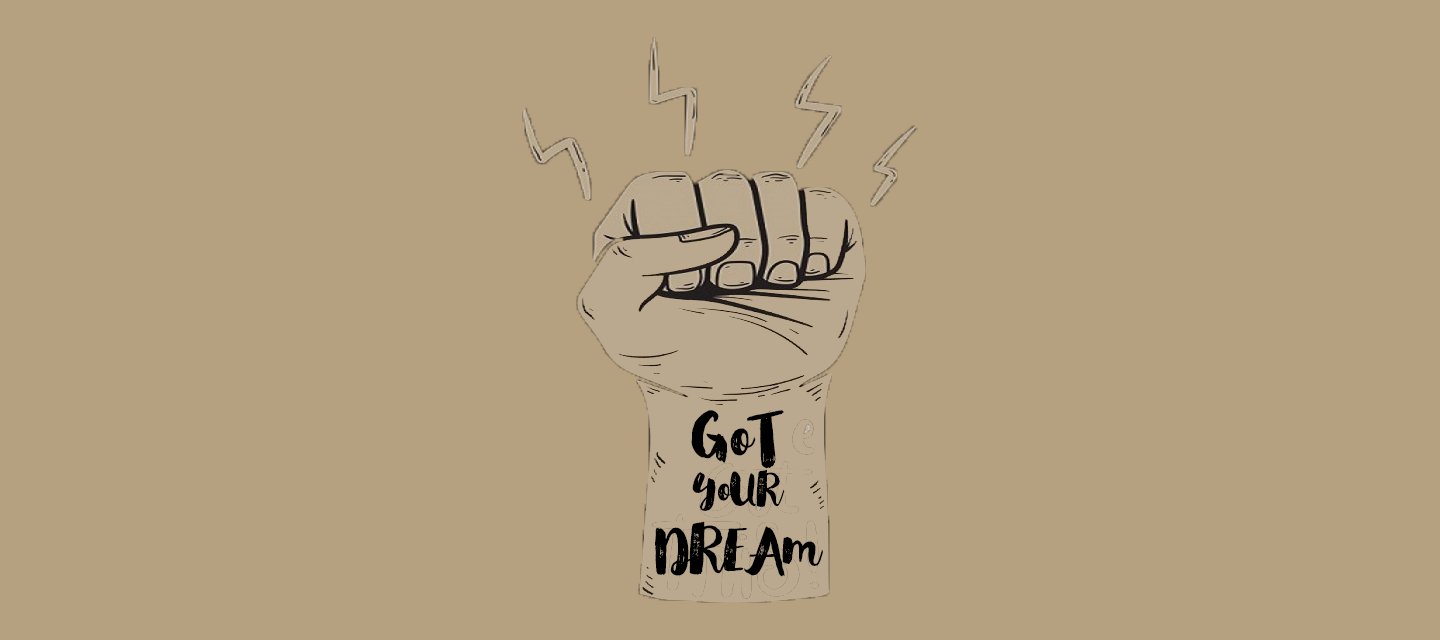
<style>
.page{position:relative;width:1440px;height:640px;background:#b5a07f}
.page>*{position:absolute;margin:0}
.t1{font:53.8px "GlamourBrush-Regular";color:#000000}
.t2{font:59.4px "GlamourBrush-Regular";color:#000000}
.t3{font:37.7px "GlamourBrush-Regular";color:#000000}
</style>
<div class="page">
<p class="t1" style="left:655px;top:410px;width:168px;height:167px;text-align:center"><span class="t2">GoT<br></span><span class="t3">YoUR<br></span>DREAm</p>
</div>
